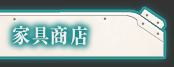
<style>
.page{position:relative;width:174px;height:67px}
.page>*{position:absolute;margin:0}
.t1{font:20px "RyuminPr6N-ExBold";letter-spacing:0.075em;color:#efefeb;scale:0.9 1}
</style>
<div class="page">
<p class="t1" style="left:12px;top:25px;width:76px;height:21px">家具商店</p>
</div>
